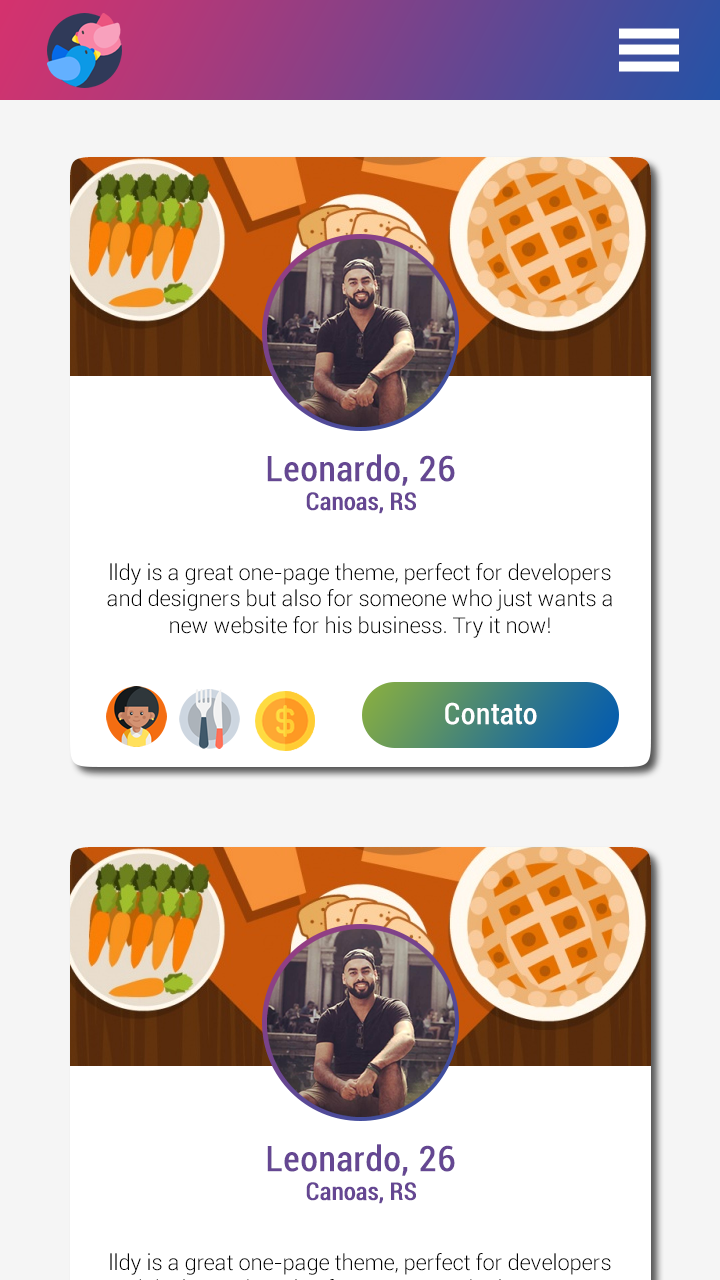
<style>
.page{position:relative;width:720px;height:1280px;background:#ffffff}
.page>*{position:absolute;margin:0}
.t1{font:35px/42px "Roboto-Condensed";color:#654792;font-weight:bold}
.t2{font:24px/28.8px "Roboto-Condensed";color:#654792;font-weight:bold}
.t3{font:22px/26.4px "Roboto-Light";color:#000000}
.t4{font:29px "Roboto-Condensed";color:#ffffff;font-weight:bold}
</style>
<div class="page">
<p class="t1" style="left:267px;top:454px;width:188px;height:60px;text-align:center">Leonardo, 26<br><span class="t2">Canoas, RS</span></p>
<p class="t3" style="left:107px;top:563px;width:505px;height:75px;text-align:center">lldy is a great one-page theme, perfect for developers and designers but also for someone who just wants a new website for his business. Try it now!</p>
<p class="t4" style="left:445px;top:702px;width:92px;height:23px">Contato</p>
<p class="t1" style="left:267px;top:1144px;width:188px;height:60px;text-align:center">Leonardo, 26<br><span class="t2">Canoas, RS</span></p>
</div>
